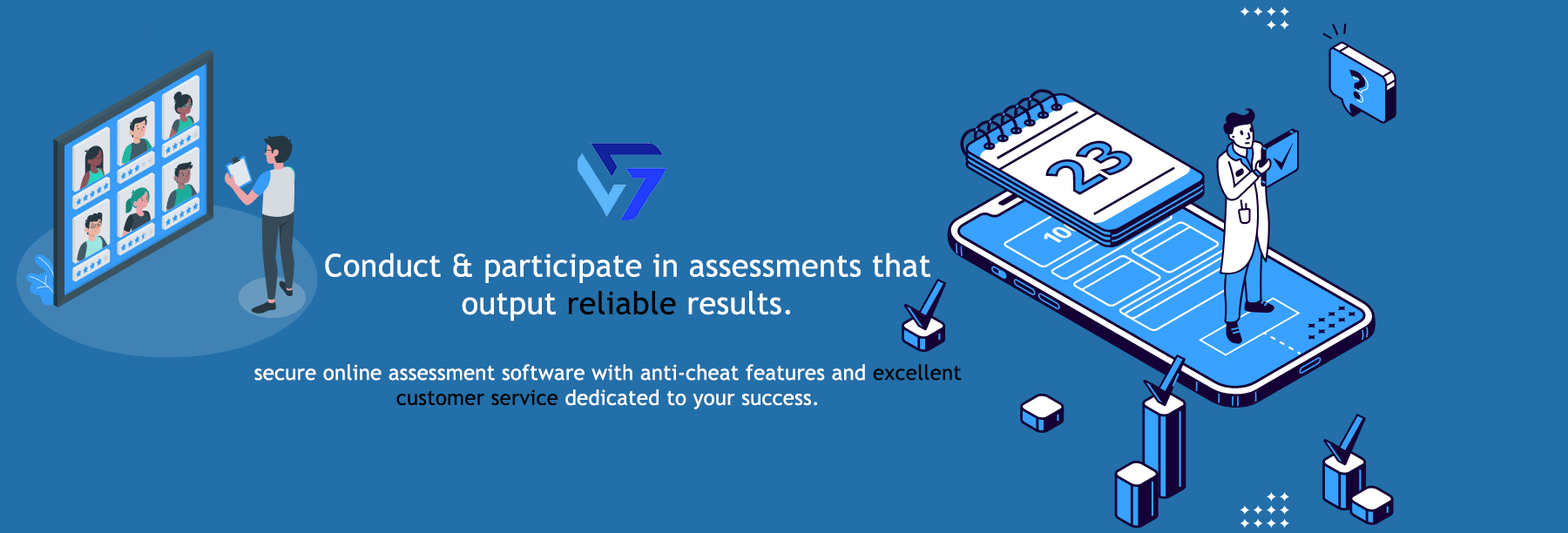
<style>
.page{position:relative;width:1568px;height:533px;background:#236fa9}
.page>*{position:absolute;margin:0}
.t1{font:31.4px "TrebuchetMS";letter-spacing:0.01em;color:#ffffff}
.t2{font:31.4px "TrebuchetMS";letter-spacing:0.01em;color:#000000}
.t3{font:20.9px "TrebuchetMS";letter-spacing:0.01em;color:#ffffff}
.t4{font:20.9px "TrebuchetMS";letter-spacing:0.01em;color:#000000}
</style>
<div class="page">
<p class="t1" style="left:325px;top:253px;width:606px;height:68px;text-align:center">Conduct &amp; participate in assessments that output <span class="t2">reliable</span> results.</p>
<p class="t3" style="left:254px;top:364px;width:708px;height:45px;text-align:center">secure online assessment software with anti-cheat features and <span class="t4">excellent customer service</span> dedicated to your success.</p>
</div>
